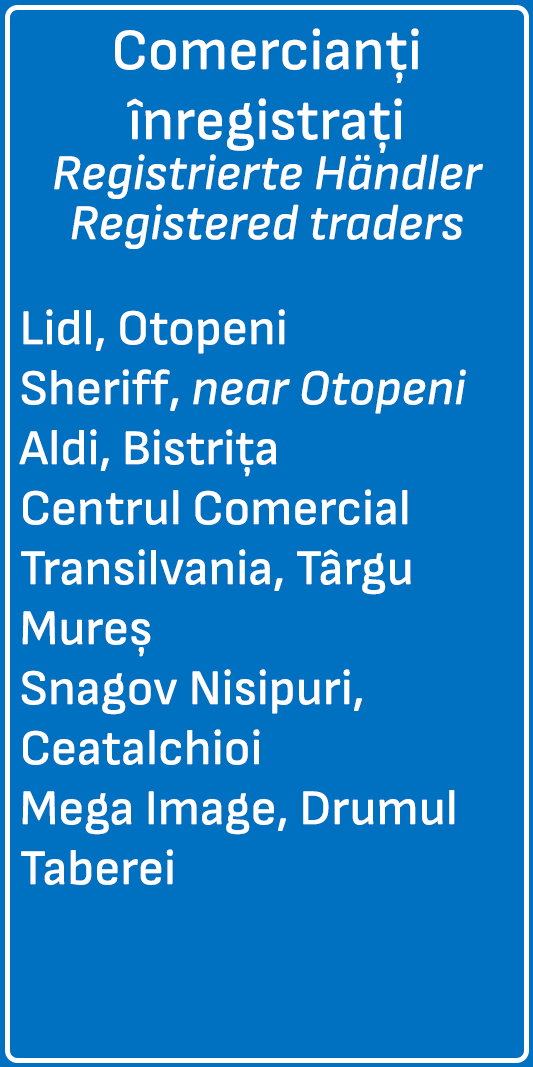
<style>
.page{position:relative;width:533px;height:1067px;background:#0070c0}
.page>*{position:absolute;margin:0}
.t1{font:50px/50px "SofiaSans-MediumItalic";color:#ffffff}
.t2{font:58.3px "SofiaSans-Medium";color:#ffffff}
.t3{font:50px "SofiaSans-Medium";color:#ffffff}
.t4{font:50px "SofiaSans-MediumItalic";color:#ffffff}
</style>
<div class="page">
<p class="t1" style="left:54px;top:28px;width:429px;height:221px;text-align:center"><span class="t2">Comercianți înregistrați</span><br>Registrierte Händler<br>Registered traders</p>
<p class="t3" style="left:19px;top:309px;width:447px;height:576px">Lidl, Otopeni<br>Sheriff, <span class="t4">near Otopeni<br></span>Aldi, Bistrița<br>Centrul Comercial Transilvania, Târgu Mureș<br>Snagov Nisipuri, Ceatalchioi<br>Mega Image, Drumul Taberei</p>
</div>
